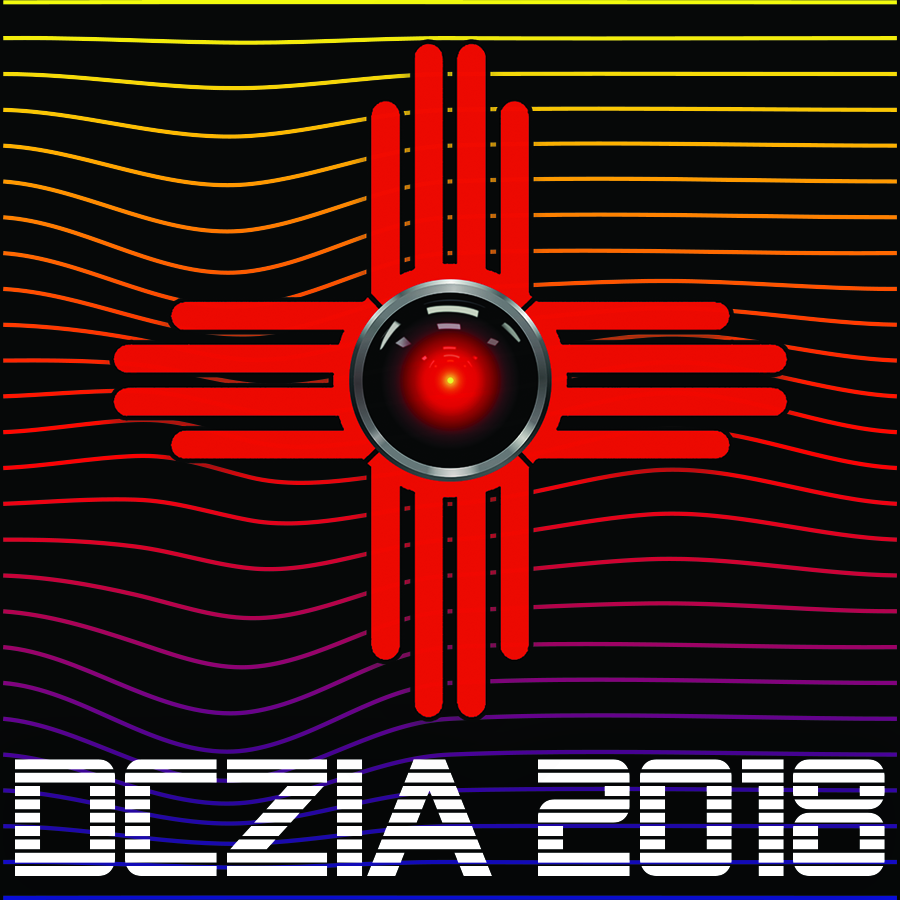
<style>
.page{position:relative;width:900px;height:900px;background:#060808}
.page>*{position:absolute;margin:0}
.t1{font:166.7px "AlienEncounters";color:#ffffff}
</style>
<div class="page">
<p class="t1" style="left:15px;top:759px;width:870px;height:117px">DCZIA 2018</p>
</div>
